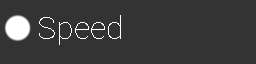
<style>
.page{position:relative;width:256px;height:64px;background:#333333}
.page>*{position:absolute;margin:0}
.t1{font:32px "Roboto-Thin";color:#ffffff}
</style>
<div class="page">
<p class="t1" style="left:39px;top:15px;width:82px;height:30px">Speed</p>
</div>
